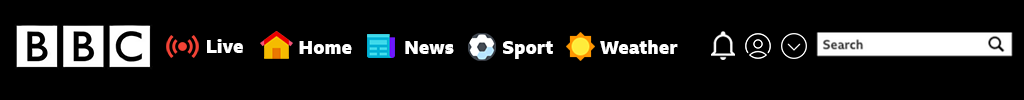
<style>
.page{position:relative;width:1024px;height:100px;background:#000000}
.page>*{position:absolute;margin:0}
.t1{font:18.8px "BBCReithSans-XBold";color:#ffffff}
</style>
<div class="page">
<p class="t1" style="left:207px;top:39px;width:36px;height:14px">Live</p>
<p class="t1" style="left:299px;top:41px;width:53px;height:13px">Home</p>
<p class="t1" style="left:405px;top:41px;width:49px;height:13px">News</p>
<p class="t1" style="left:503px;top:41px;width:50px;height:18px">Sport</p>
<p class="t1" style="left:600px;top:40px;width:78px;height:14px">Weather</p>
</div>
